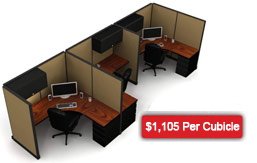
<style>
.page{position:relative;width:257px;height:163px;background:#ffffff}
.page>*{position:absolute;margin:0}
.t1{font:11px "ArialMT";letter-spacing:-0.025em;color:#ffffff;font-weight:bold}
</style>
<div class="page">
<p class="t1" style="left:145px;top:122px;width:95px;height:11px">$1,105 Per Cubicle</p>
</div>
